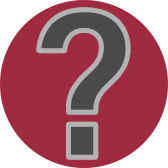
<style>
.page{position:relative;width:168px;height:168px;background:#9f2a42}
.page>*{position:absolute;margin:0}
.t1{font:210px "AcuminConcept-Semibold";letter-spacing:-0.04em;color:#4a4a4a}
</style>
<div class="page">
<p class="t1" style="left:38px;top:9px;width:90px;height:149px">?</p>
</div>
